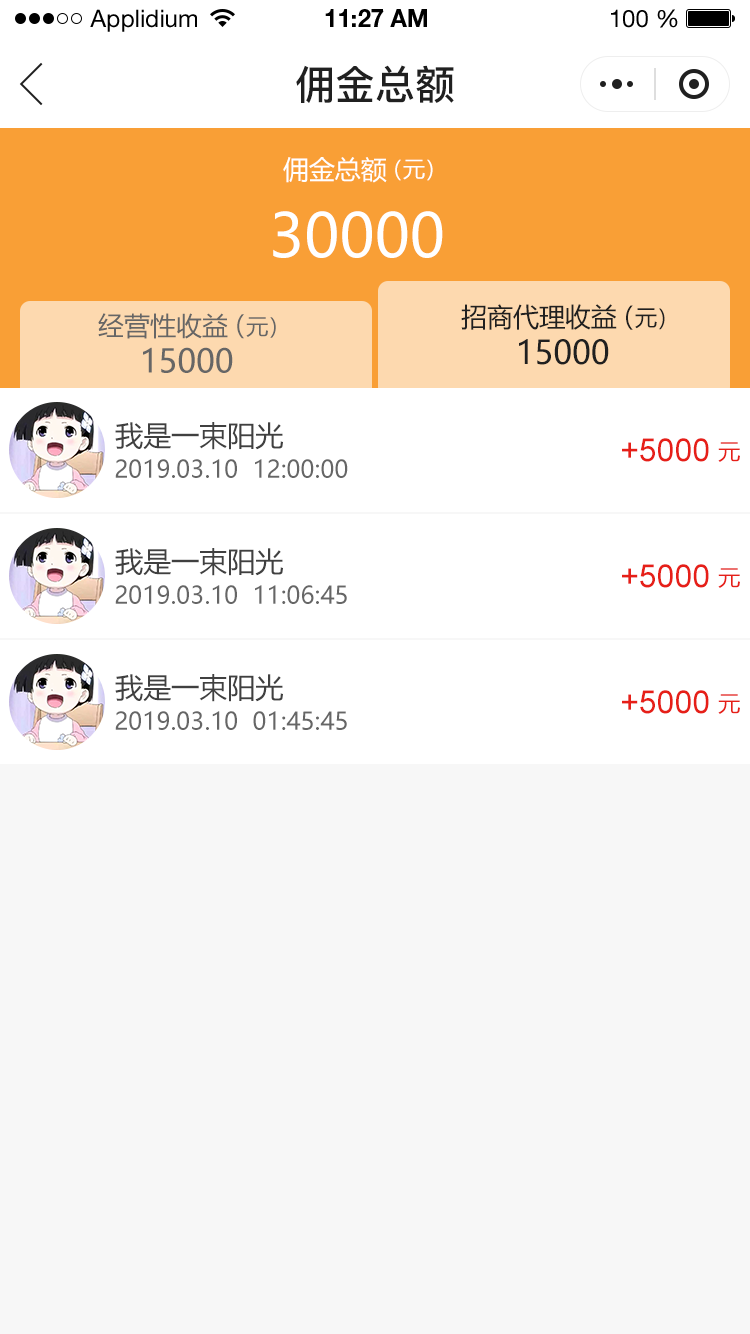
<style>
.page{position:relative;width:750px;height:1334px;background:#f7f7f7}
.page>*{position:absolute;margin:0}
.t1{font:24px "HelveticaNeueLTStd-Roman";color:#000000}
.t2{font:24px "HelveticaNeueLTStd-Bd";color:#000000}
.t3{font:40px "PingFang-SC-Bold";color:#202020;text-transform:uppercase}
.t4{font:26px "MicrosoftYaHei";color:#ffffff;text-transform:uppercase}
.t5{font:22px "MicrosoftYaHei";color:#ffffff;text-transform:uppercase}
.t6{font:60px "MicrosoftYaHei";color:#ffffff;text-transform:uppercase}
.t7{font:26.2px "MicrosoftYaHei";color:#202020;text-transform:uppercase}
.t8{font:22.2px "MicrosoftYaHei";color:#202020;text-transform:uppercase}
.t9{font:26px "MicrosoftYaHei";color:#666666;text-transform:uppercase}
.t10{font:22px "MicrosoftYaHei";color:#666666;text-transform:uppercase}
.t11{font:32.2px "MicrosoftYaHei";color:#202020;text-transform:uppercase}
.t12{font:32px "MicrosoftYaHei";color:#666666;text-transform:uppercase}
.t13{font:28px "MicrosoftYaHei";color:#404040;text-transform:uppercase}
.t14{font:32px "ArialMT";color:#e61f18;text-transform:uppercase}
.t15{font:22px "MicrosoftYaHei";color:#e61f18;text-transform:uppercase}
.t16{font:24px "MicrosoftYaHei";color:#666666;text-transform:uppercase}
</style>
<div class="page">
<p class="t1" style="left:90px;top:9px;width:107px;height:23px">Applidium</p>
<p class="t2" style="left:325px;top:9px;width:102px;height:18px">11:27 AM</p>
<p class="t1" style="left:611px;top:9px;width:67px;height:19px">100 %</p>
<p class="t3" style="left:296px;top:65px;width:158px;height:38px">佣金总额</p>
<p class="t4" style="left:283px;top:157px;width:104px;height:26px">佣金总额</p>
<p class="t5" style="left:395px;top:159px;width:38px;height:22px">（元）</p>
<p class="t6" style="left:273px;top:211px;width:170px;height:47px">30000</p>
<p class="t7" style="left:461px;top:304px;width:156px;height:26px">招商代理收益</p>
<p class="t8" style="left:626px;top:305px;width:39px;height:25px"><span class="t7">（</span>元）</p>
<p class="t9" style="left:98px;top:313px;width:130px;height:26px">经营性收益</p>
<p class="t10" style="left:237px;top:314px;width:39px;height:25px"><span class="t9">（</span>元）</p>
<p class="t11" style="left:519px;top:339px;width:90px;height:26px">15000</p>
<p class="t12" style="left:143px;top:347px;width:90px;height:26px">15000</p>
<p class="t13" style="left:115px;top:422px;width:168px;height:28px">我是一束阳光</p>
<p class="t14" style="left:622px;top:438px;width:87px;height:24px">+5000</p>
<p class="t15" style="left:718px;top:442px;width:22px;height:20px">元</p>
<p class="t16" style="left:115px;top:459px;width:233px;height:19px">2019.03.10  12:00:00</p>
<p class="t13" style="left:115px;top:548px;width:168px;height:28px">我是一束阳光</p>
<p class="t14" style="left:622px;top:564px;width:87px;height:24px">+5000</p>
<p class="t15" style="left:718px;top:568px;width:22px;height:20px">元</p>
<p class="t16" style="left:115px;top:585px;width:232px;height:19px">2019.03.10  11:06:45</p>
<p class="t13" style="left:115px;top:674px;width:168px;height:28px">我是一束阳光</p>
<p class="t14" style="left:622px;top:690px;width:87px;height:24px">+5000</p>
<p class="t15" style="left:718px;top:694px;width:22px;height:20px">元</p>
<p class="t16" style="left:115px;top:711px;width:232px;height:19px">2019.03.10  01:45:45</p>
</div>
